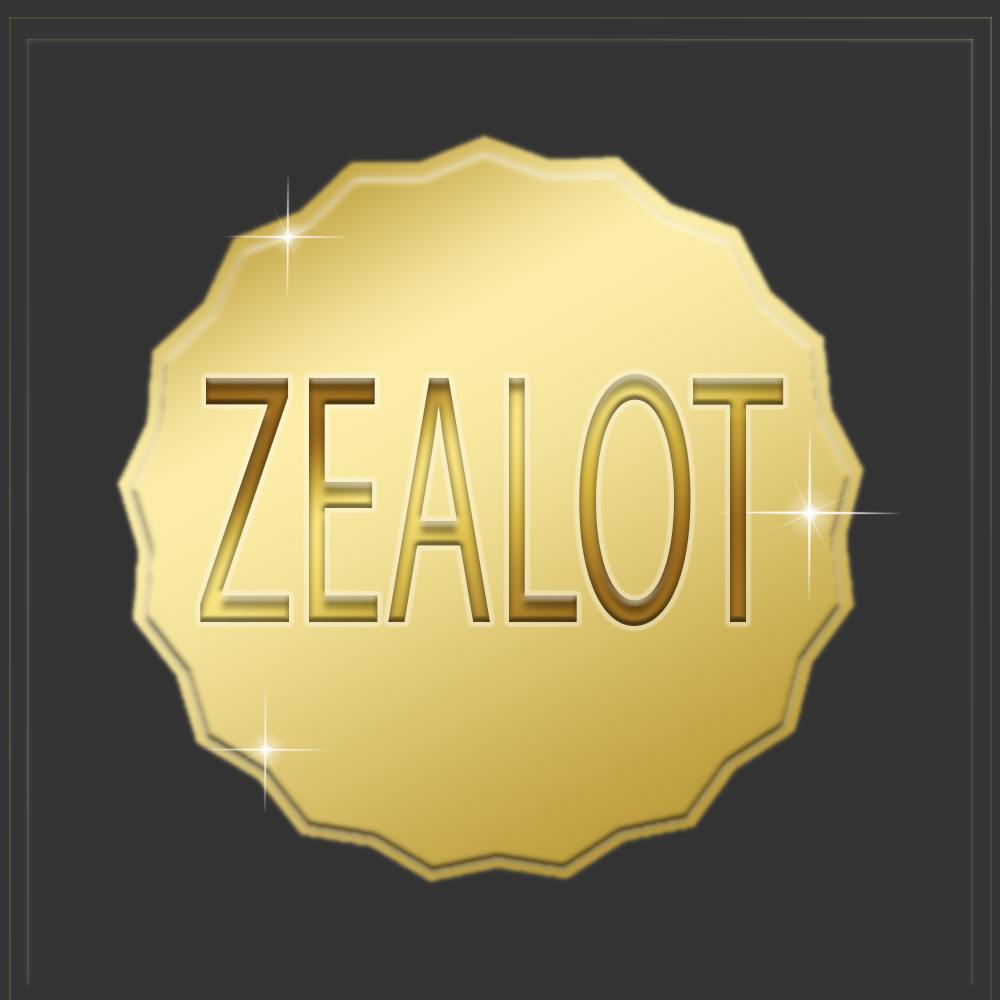
<style>
.page{position:relative;width:1000px;height:1000px;background:#333333}
.page>*{position:absolute;margin:0}
.t1{font:361.4px "MyriadPro-Regular";scale:0.5 1}
</style>
<div class="page">
<p class="t1" style="left:200px;top:373px;width:584px;height:254px">ZEALOT</p>
</div>
